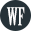
<style>
.page{position:relative;width:32px;height:32px;background:#263238}
.page>*{position:absolute;margin:0}
.t1{font:24px "BirchStd";letter-spacing:-0.025em;color:#ffffff}
</style>
<div class="page">
<p class="t1" style="left:6px;top:7px;width:19px;height:19px">WF</p>
</div>
